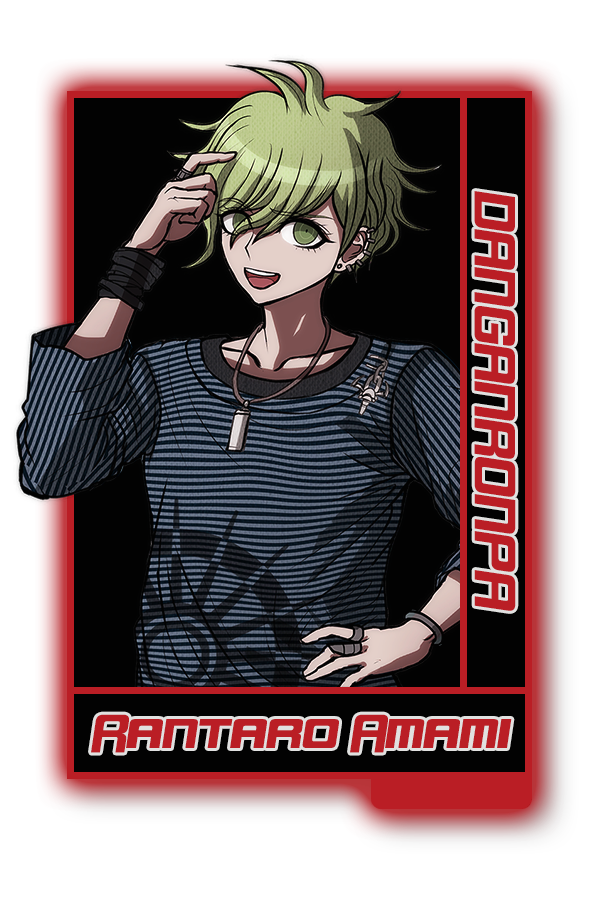
<style>
.page{position:relative;width:600px;height:900px;background:#ffffff}
.page>*{position:absolute;margin:0}
.t1{font:48.8px "DorBlue";color:#bb2c2e}
.t2{font:45.6px "DorBlue";color:#bb2c2e}
</style>
<div class="page">
<p class="t1" style="left:474px;top:191px;width:42px;height:420px;rotate:90deg">DANGANRONPA</p>
<p class="t2" style="left:91px;top:714px;width:421px;height:39px">Rantaro Amami</p>
</div>
